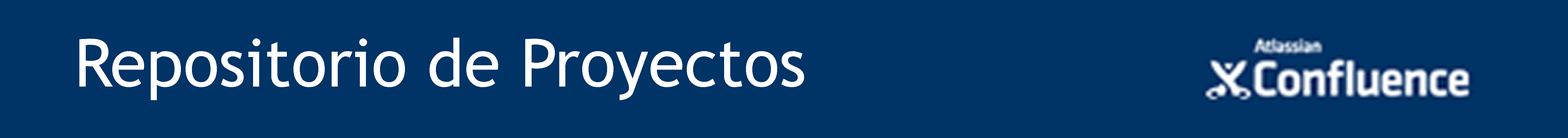
<style>
.page{position:relative;width:1568px;height:138px;background:#003366}
.page>*{position:absolute;margin:0}
.t1{font:66.4px "TrebuchetMS";color:#ffffff}
</style>
<div class="page">
<p class="t1" style="left:79px;top:38px;width:725px;height:62px">Repositorio de Proyectos</p>
</div>
